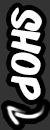
<style>
.page{position:relative;width:50px;height:130px;background:#333333}
.page>*{position:absolute;margin:0}
.t1{font:33.3px "KomikaAxis";color:#ffffff}
</style>
<div class="page">
<p class="t1" style="left:11px;top:7px;width:31px;height:93px;rotate:90deg">shop</p>
</div>
